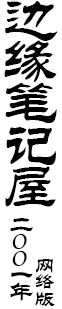
<style>
.page{position:relative;width:62px;height:309px;background:#ffffff}
.page>*{position:absolute;margin:0}
.t1{font:58.3px/41.7px "STLiti";color:#000000}
.t2{font:25px/16.7px "STLiti";color:#000000}
.t3{font:20.8px/16.7px "STLiti";color:#000000}
</style>
<div class="page">
<p class="t1" style="left:4px;top:1px;width:54px;height:206px">边<br>缘<br>笔<br>记<br>屋</p>
<p class="t2" style="left:10px;top:218px;width:23px;height:83px">二<br>O<br>O<br>一<br>年</p>
<p class="t3" style="left:35px;top:259px;width:20px;height:47px">网<br>络<br>版</p>
</div>
